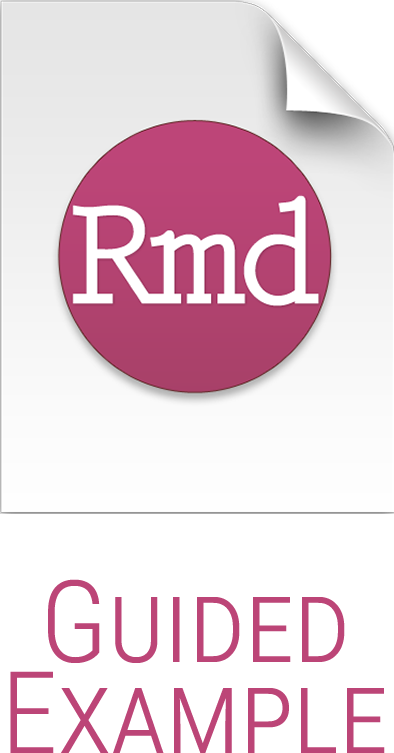
<style>
.page{position:relative;width:394px;height:753px;background:#ffffff}
.page>*{position:absolute;margin:0}
.t1{font:114.3px/91.4px "RobotoCondensed-Light";color:#bc4577;font-variant:small-caps}
</style>
<div class="page">
<p class="t1" style="left:10px;top:579px;width:375px;height:174px;text-align:center">Guided<br>Example</p>
</div>
